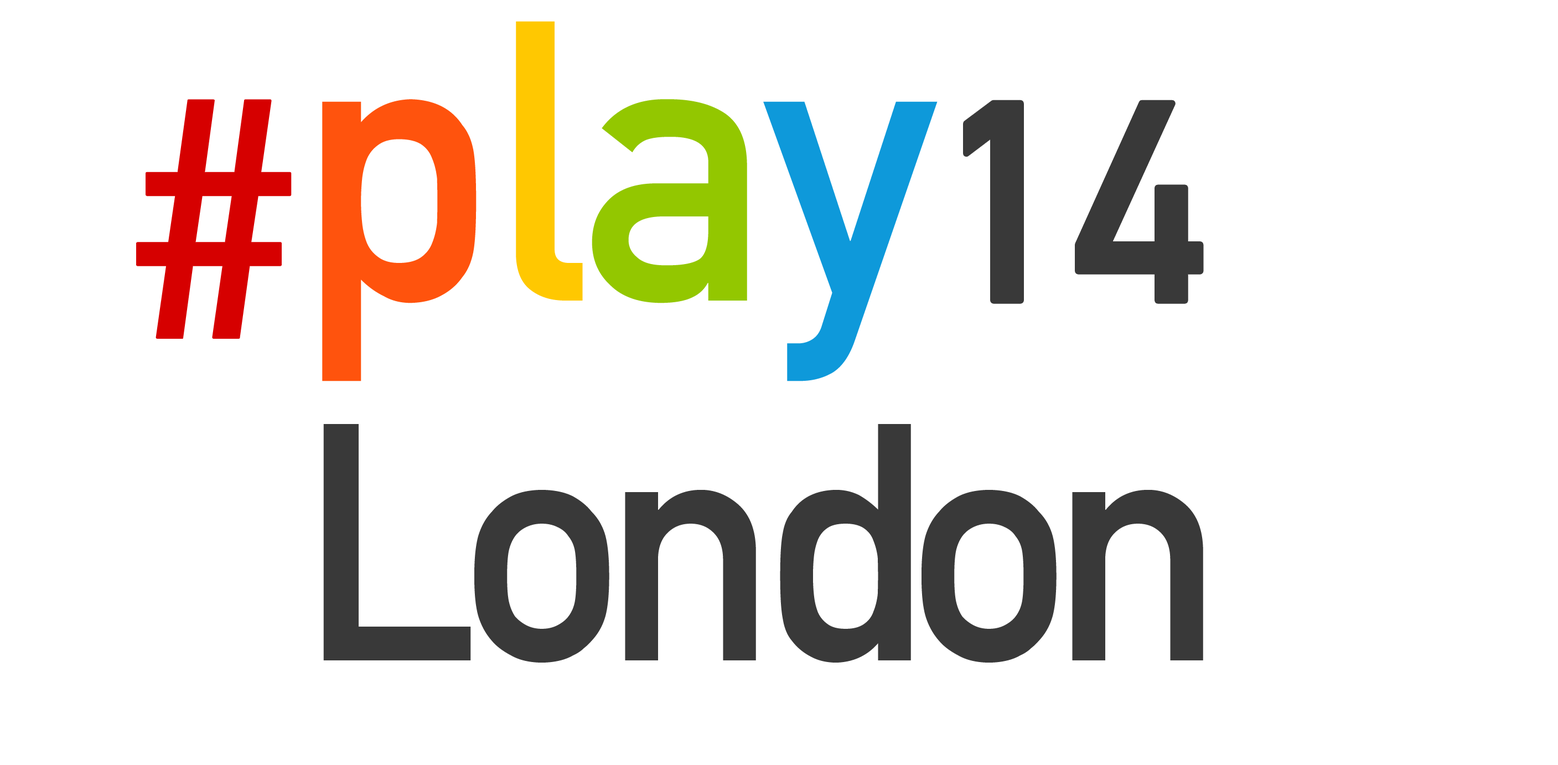
<style>
.page{position:relative;width:1558px;height:765px;background:#ffffff}
.page>*{position:absolute;margin:0}
.t1{font:392px "DINAlternate-Bold";letter-spacing:-0.025em;color:#ff530d}
.t2{font:392px "DINAlternate-Bold";letter-spacing:-0.025em;color:#ffc801}
.t3{font:392px "DINAlternate-Bold";letter-spacing:-0.025em;color:#93c700}
.t4{font:392px "DINAlternate-Bold";letter-spacing:-0.025em;color:#0e99da}
.t5{font:333.2px "DINAlternate-Bold";letter-spacing:-0.025em;color:#d60000;font-weight:bold}
.t6{font:277px "DINAlternate-Bold";letter-spacing:-0.025em;color:#393939;font-weight:bold}
.t7{font:332.2px "DINAlternate-Bold";letter-spacing:-0.07em;color:#393939}
</style>
<div class="page">
<p class="t1" style="left:322px;top:21px;width:616px;height:360px">p<span class="t2">l</span><span class="t3">a</span><span class="t4">y</span></p>
<p class="t5" style="left:137px;top:100px;width:154px;height:238px">#</p>
<p class="t6" style="left:966px;top:102px;width:235px;height:199px">14</p>
<p class="t7" style="left:323px;top:424px;width:881px;height:239px">London</p>
</div>
